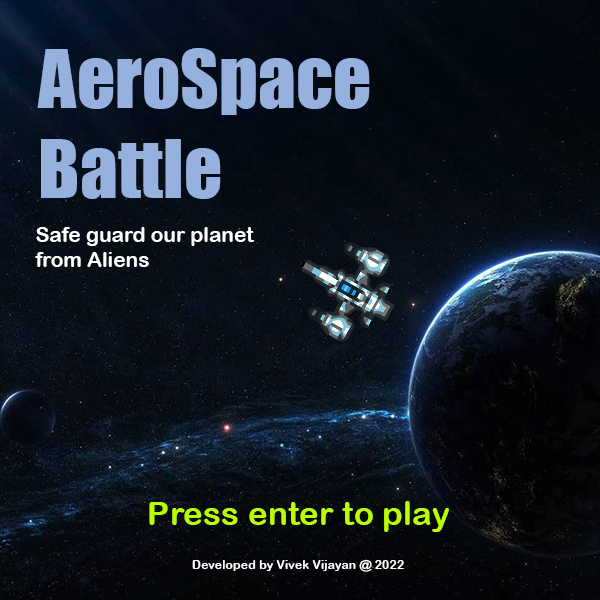
<style>
.page{position:relative;width:600px;height:600px}
.page>*{position:absolute;margin:0}
.t1{font:75px "Impact";color:#97b1df}
.t2{font:20.8px "ArialRoundedMTBold";color:#ffffff}
.t3{font:33.3px "ArialRoundedMTBold";color:#baff00}
.t4{font:12.4px "ArialRoundedMTBold";color:#ffffff}
</style>
<div class="page">
<p class="t1" style="left:37px;top:48px;width:333px;height:151px">AeroSpace<br>Battle</p>
<p class="t2" style="left:35px;top:227px;width:220px;height:40px">Safe guard our planet <br>from Aliens</p>
<p class="t3" style="left:149px;top:501px;width:300px;height:31px">Press enter to play</p>
<p class="t4" style="left:192px;top:559px;width:212px;height:13px">Developed by Vivek Vijayan @ 2022</p>
</div>
